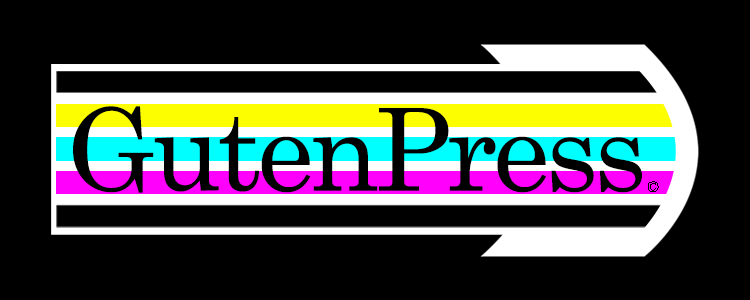
<style>
.page{position:relative;width:750px;height:300px;background:#000000}
.page>*{position:absolute;margin:0}
.t1{font:114.3px "CenturySchoolbook";letter-spacing:-0.04em;color:#000000}
.t2{font:15.6px "Perpetua";letter-spacing:-0.04em;color:#000000}
</style>
<div class="page">
<p class="t1" style="left:73px;top:106px;width:569px;height:87px">GutenPress</p>
<p class="t2" style="left:648px;top:181px;width:11px;height:11px">©</p>
</div>
